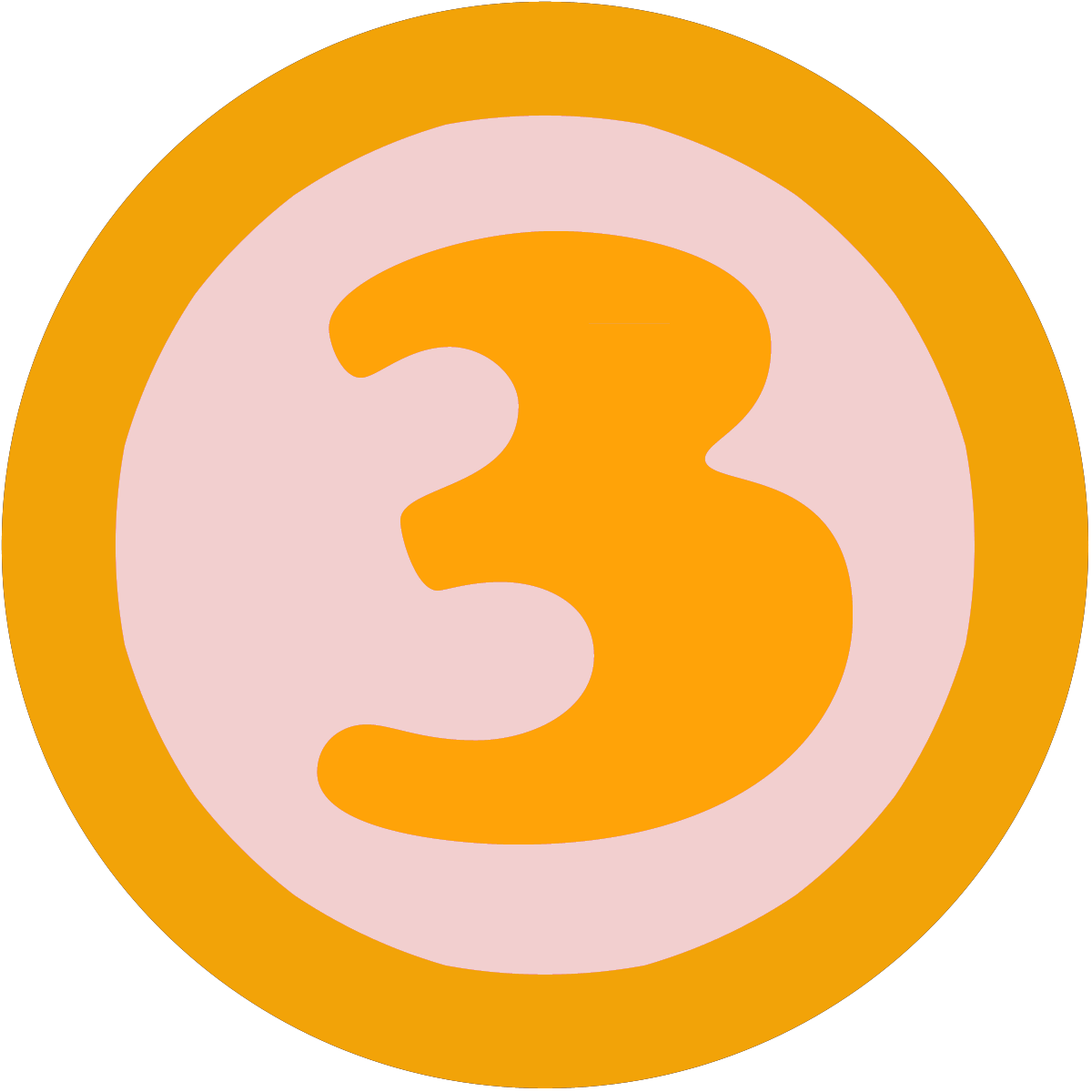
<style>
.page{position:relative;width:1092px;height:1092px;background:#f2cfcf}
.page>*{position:absolute;margin:0}
.t1{font:881.9px "CooperBlackStd";color:#ffa308}
</style>
<div class="page">
<p class="t1" style="left:317px;top:231px;width:536px;height:613px">3</p>
</div>
